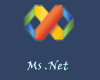
<style>
.page{position:relative;width:100px;height:80px;background:#324464}
.page>*{position:absolute;margin:0}
.t1{font:12px "VinerHandITC";color:#c6fcf4}
</style>
<div class="page">
<p class="t1" style="left:27px;top:60px;width:42px;height:11px">Ms .Net</p>
</div>
